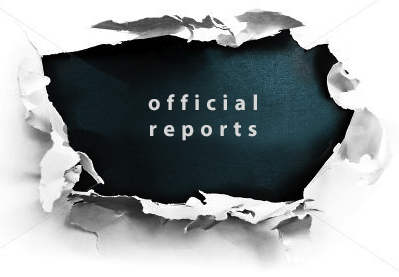
<style>
.page{position:relative;width:399px;height:277px;background:#ffffff}
.page>*{position:absolute;margin:0}
.t1{font:22px "MyriadPro-Bold";letter-spacing:0.28em;color:#d6d6d6}
</style>
<div class="page">
<p class="t1" style="left:148px;top:94px;width:109px;height:47px;text-align:center">official<br>reports</p>
</div>
